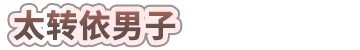
<style>
.page{position:relative;width:360px;height:50px;background:#ffffff}
.page>*{position:absolute;margin:0}
.t1{font:32px "SourceHanSansSC-Bold";color:#73534d;font-weight:bold}
</style>
<div class="page">
<p class="t1" style="left:13px;top:9px;width:163px;height:32px">太转依男子</p>
</div>
